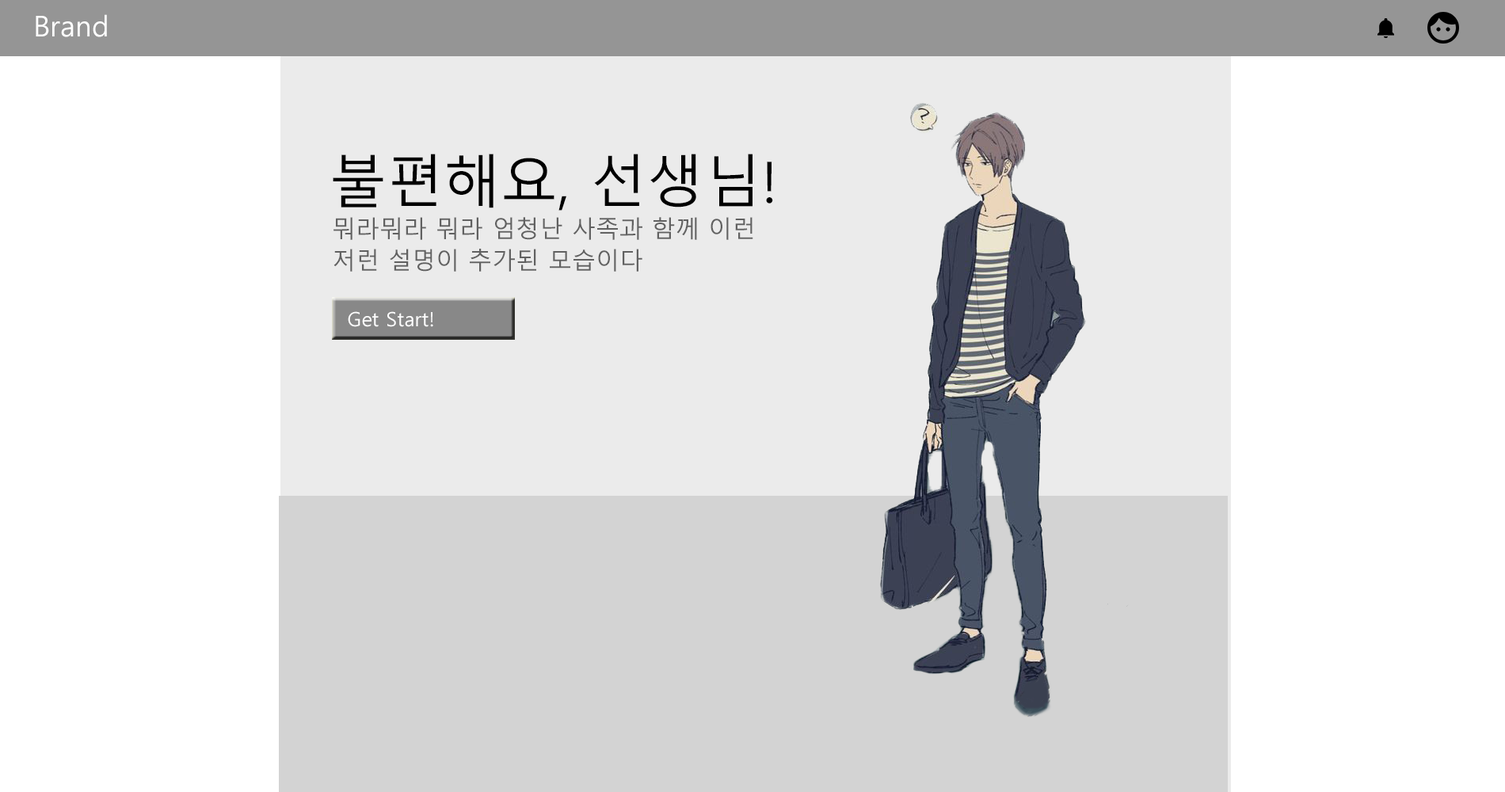
<style>
.page{position:relative;width:1505px;height:792px;background:#ffffff}
.page>*{position:absolute;margin:0}
.t1{font:28.5px "MalgunGothic";color:#ffffff}
.t2{font:57px "MalgunGothic";color:#000000}
.t3{font:23.8px/31.7px "MalgunGothic";color:#616161}
.t4{font:19.8px "MalgunGothic";color:#fefefe}
</style>
<div class="page">
<p class="t1" style="left:36px;top:14px;width:71px;height:23px">Brand</p>
<p class="t2" style="left:333px;top:154px;width:440px;height:57px">불편해요, 선생님!</p>
<p class="t3" style="left:334px;top:217px;width:419px;height:55px">뭐라뭐라 뭐라 엄청난 사족과 함께 이런<br>저런 설명이 추가된 모습이다</p>
<p class="t4" style="left:348px;top:311px;width:85px;height:16px">Get Start!</p>
</div>
